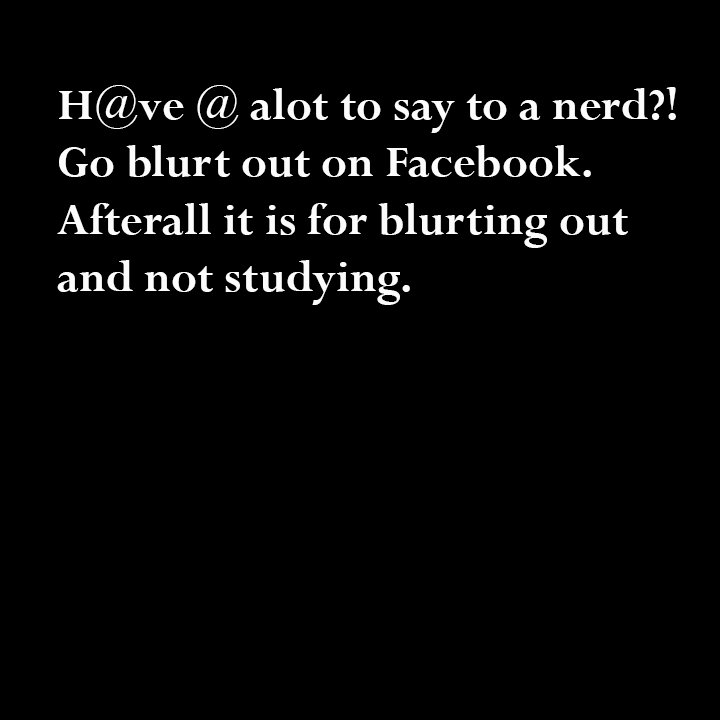
<style>
.page{position:relative;width:720px;height:720px;background:#000000}
.page>*{position:absolute;margin:0}
.t1{font:48px "Perpetua-Bold";color:#fcfcfc}
</style>
<div class="page">
<p class="t1" style="left:57px;top:85px;width:619px;height:220px">H@ve @ alot to say to a nerd?!<br>Go blurt out on Facebook.<br>Afterall it is for blurting out and not studying.</p>
</div>
